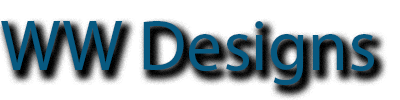
<style>
.page{position:relative;width:400px;height:100px;background:#ffffff}
.page>*{position:absolute;margin:0}
.t1{font:72px "MyriadHebrew-Regular";color:#075980}
</style>
<div class="page">
<p class="t1" style="left:1px;top:21px;width:373px;height:64px">WW Designs</p>
</div>
